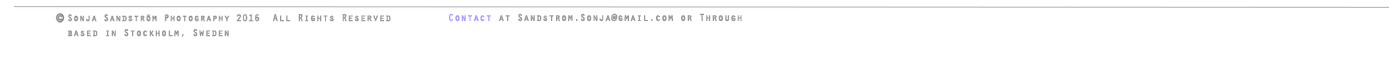
<style>
.page{position:relative;width:1400px;height:60px;background:#ffffff}
.page>*{position:absolute;margin:0}
.t1{font:10px "OratorStd";color:#999999;font-weight:bold}
</style>
<div class="page">
<p class="t1" style="left:449px;top:13px;width:293px;height:9px">Contact at Sandstrom.Sonja@gmail.com or Through</p>
<p class="t1" style="left:68px;top:29px;width:161px;height:8px">based in Stockholm, Sweden</p>
</div>
